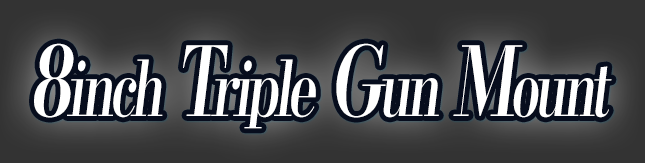
<style>
.page{position:relative;width:645px;height:163px}
.page>*{position:absolute;margin:0}
.t1{font:76.8px "KochoStd-Heavy";letter-spacing:-0.08em;color:#ffffff;font-style:italic;scale:0.69 1}
.t2{font:96px "KochoStd-Heavy";letter-spacing:-0.08em;color:#ffffff;font-style:italic;scale:0.69 1}
</style>
<div class="page">
<p class="t1" style="left:34px;top:43px;width:578px;height:86px"><span class="t2">8</span>inch<span class="t2"> T</span>riple<span class="t2"> G</span>un<span class="t2"> M</span>ount</p>
</div>
